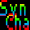
<style>
.page{position:relative;width:30px;height:30px;background:#000000}
.page>*{position:absolute;margin:0}
.t1{font:30px "Photoshop Small";letter-spacing:0.04em}
</style>
<div class="page">
<p class="t1" style="left:0px;top:0px;width:26px;height:21px">Syn</p>
<p class="t1" style="left:5px;top:13px;width:24px;height:17px">Cha</p>
</div>
